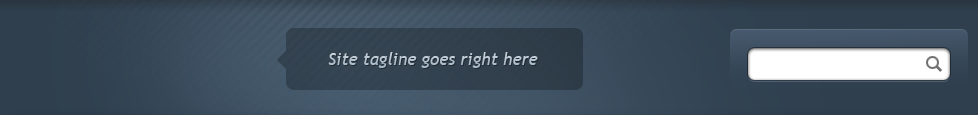
<style>
.page{position:relative;width:978px;height:115px}
.page>*{position:absolute;margin:0}
.t1{font:17px "TrebuchetMS-Italic";color:#a3b5c4}
</style>
<div class="page">
<p class="t1" style="left:328px;top:52px;width:210px;height:16px">Site tagline goes right here</p>
</div>
